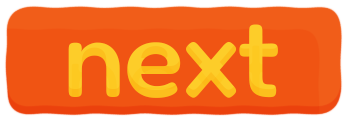
<style>
.page{position:relative;width:343px;height:121px;background:#f05413}
.page>*{position:absolute;margin:0}
.t1{font:110.2px "Fredoka-Medium";letter-spacing:-0.005em;color:#fdc921}
</style>
<div class="page">
<p class="t1" style="left:68px;top:24px;width:210px;height:74px">next</p>
</div>
